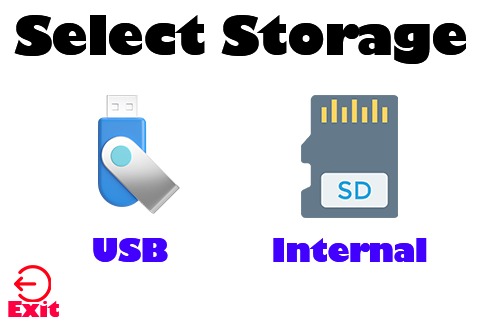
<style>
.page{position:relative;width:480px;height:320px;background:#ffffff}
.page>*{position:absolute;margin:0}
.t1{font:52.9px "GillSans-UltraBold";letter-spacing:-0.025em;color:#000000}
.t2{font:31.8px "GillSans-UltraBold";letter-spacing:-0.025em;color:#4200ff}
.t3{font:21.2px "GillSans-UltraBold";letter-spacing:-0.025em;color:#ff0042}
</style>
<div class="page">
<p class="t1" style="left:14px;top:15px;width:452px;height:49px">Select Storage</p>
<p class="t2" style="left:93px;top:238px;width:75px;height:24px">USB</p>
<p class="t2" style="left:273px;top:238px;width:154px;height:24px">Internal</p>
<p class="t3" style="left:8px;top:301px;width:51px;height:16px">Exit</p>
</div>
